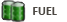
<style>
.page{position:relative;width:67px;height:22px;background:#ffffff}
.page>*{position:absolute;margin:0}
.t1{font:12px "Calibri-Bold";color:#4c4843}
</style>
<div class="page">
<p class="t1" style="left:33px;top:7px;width:24px;height:8px">FUEL</p>
</div>
